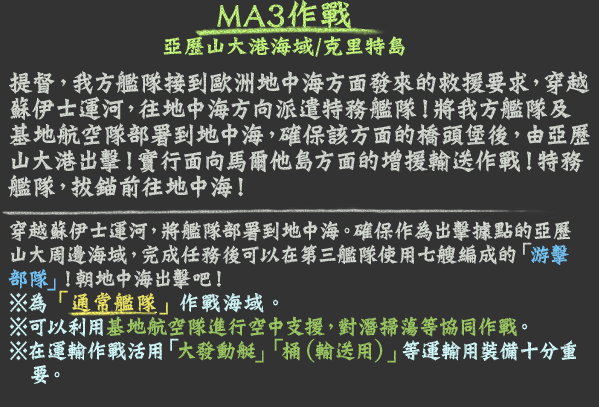
<style>
.page{position:relative;width:599px;height:407px;background:#333333}
.page>*{position:absolute;margin:0}
.t1{font:24px/38px "DFLungMen-W9-WINP-BF";color:#bbeb77}
.t2{font:36px/38px "DFLungMen-W9-WINP-BF";color:#bbeb77}
.t3{font:28px/26px "DFLungMen-W9-WINP-BF";color:#d9ded6;scale:0.9 1}
.t4{font:28px/46px "DFLungMen-W9-WINP-BF";color:#d9ded6;scale:0.9 1}
.t5{font:24px/24px "DFLungMen-W9-WINP-BF";color:#d9ded6;scale:0.9 1}
.t6{font:24px/24px "DFLungMen-W9-WINP-BF";color:#78cbff;scale:0.9 1}
.t7{font:24px/24px "DFLungMen-W9-WINP-BF";color:#d7feff;scale:0.9 1}
.t8{font:24px/24px "DFLungMen-W9-WINP-BF";color:#f5ed68;scale:0.9 1}
.t9{font:24px/24px "DFLungMen-W9-WINP-BF";color:#a0cc65;scale:0.9 1}
</style>
<div class="page">
<p class="t1" style="left:163px;top:0px;width:242px;height:57px;text-align:center"><span class="t2">MA3作戰<br></span>亞歷山大港海域/克里特島</p>
<p class="t3" style="left:8px;top:70px;width:582px;height:314px">提督，我方艦隊接到歐洲地中海方面發來的救援要求，穿越<br>蘇伊士運河，往地中海方向派遣特務艦隊！將我方艦隊及<br>基地航空隊部署到地中海，確保該方面的橋頭堡後，由亞歷<br>山大港出擊！實行面向馬爾他島方面的增援輸送作戰！特務<br><span class="t4">艦隊，拔錨前往地中海！<br></span><span class="t5">穿越蘇伊士運河，將艦隊部署到地中海。確保作為出擊據點的亞歷<br>山大周邊海域，完成任務後可以在第三艦隊使用七艘編成的「</span><span class="t6">游擊<br>部隊」</span><span class="t5">！朝地中海出擊吧！<br></span><span class="t7">※為</span><span class="t8">「通常艦隊」</span><span class="t7">作戰海域。<br>※可以利用</span><span class="t9">基地航空隊進行空中支援，對潛掃蕩等協同作戰</span><span class="t7">。<br>※在運輸作戰活用「</span><span class="t9">大發動艇」「桶（輸送用）」</span><span class="t7">等運輸用裝備十分重<br>　要。</span></p>
</div>
